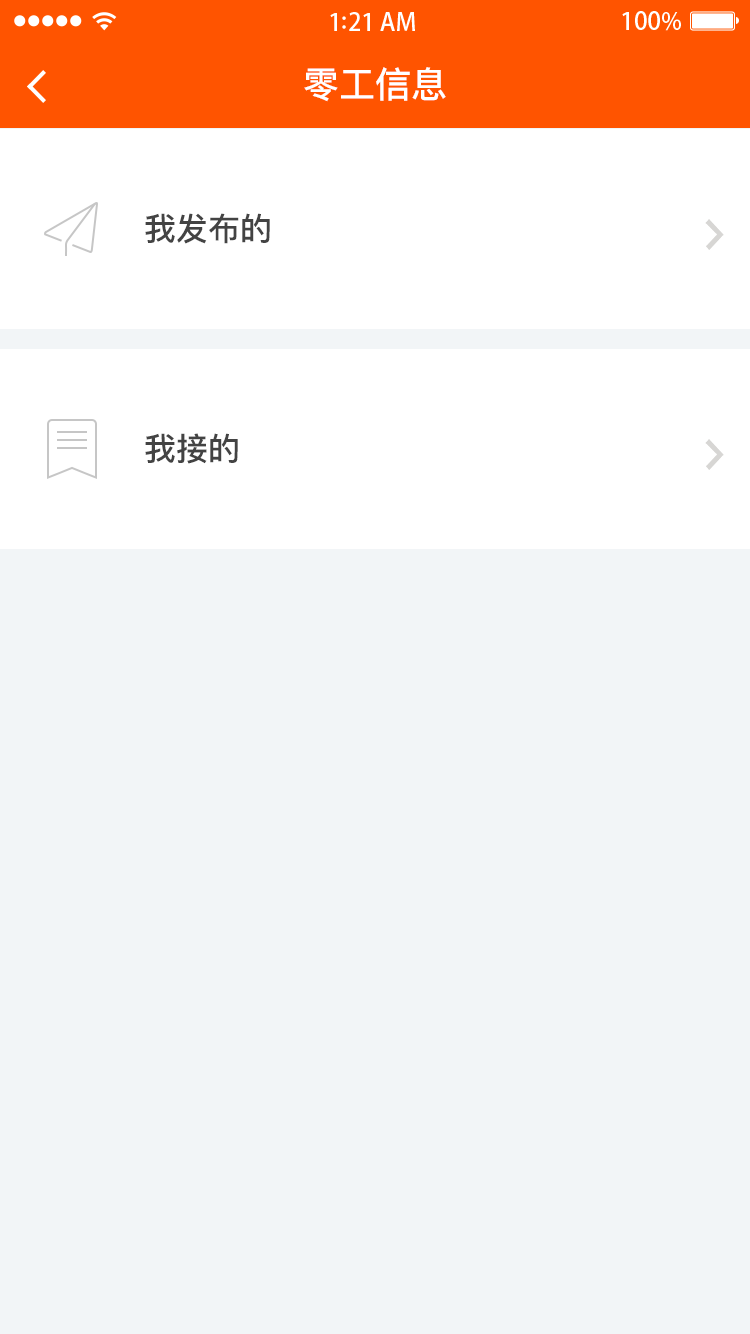
<style>
.page{position:relative;width:750px;height:1334px;background:#f2f5f7}
.page>*{position:absolute;margin:0}
.t1{font:36px "PingFangSC-Medium";color:#ffffff}
.t2{font:32px "PingFangSC-Medium";color:#434343}
</style>
<div class="page">
<p class="t1" style="left:304px;top:67px;width:142px;height:35px">零工信息</p>
<p class="t2" style="left:145px;top:213px;width:125px;height:31px">我发布的</p>
<p class="t2" style="left:145px;top:433px;width:93px;height:31px">我接的</p>
</div>
